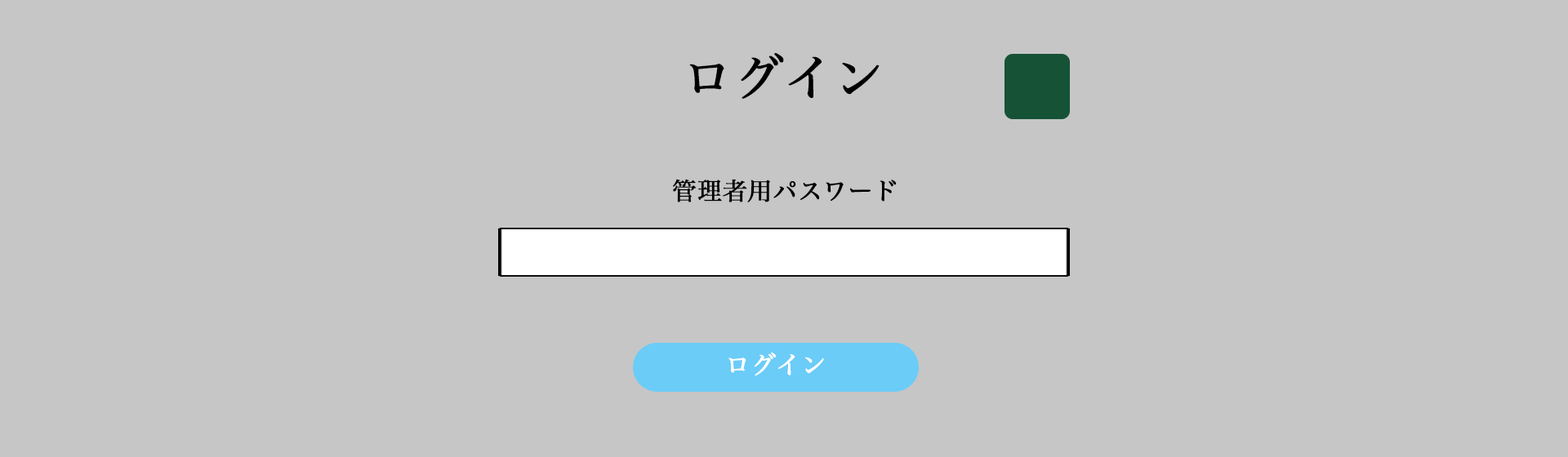
<style>
.page{position:relative;width:1568px;height:457px;background:#c6c6c6}
.page>*{position:absolute;margin:0}
.t1{font:49px "HiraMinPro-W3";color:#000000;font-weight:bold}
.t2{font:24.5px "HiraMinPro-W3";color:#000000;font-weight:bold}
.t3{font:24.5px "HiraMinPro-W3";color:#ffffff;font-weight:bold}
</style>
<div class="page">
<p class="t1" style="left:689px;top:53px;width:191px;height:46px">ログイン</p>
<p class="t2" style="left:672px;top:179px;width:225px;height:24px">管理者用パスワード</p>
<p class="t3" style="left:728px;top:353px;width:96px;height:23px">ログイン</p>
</div>
